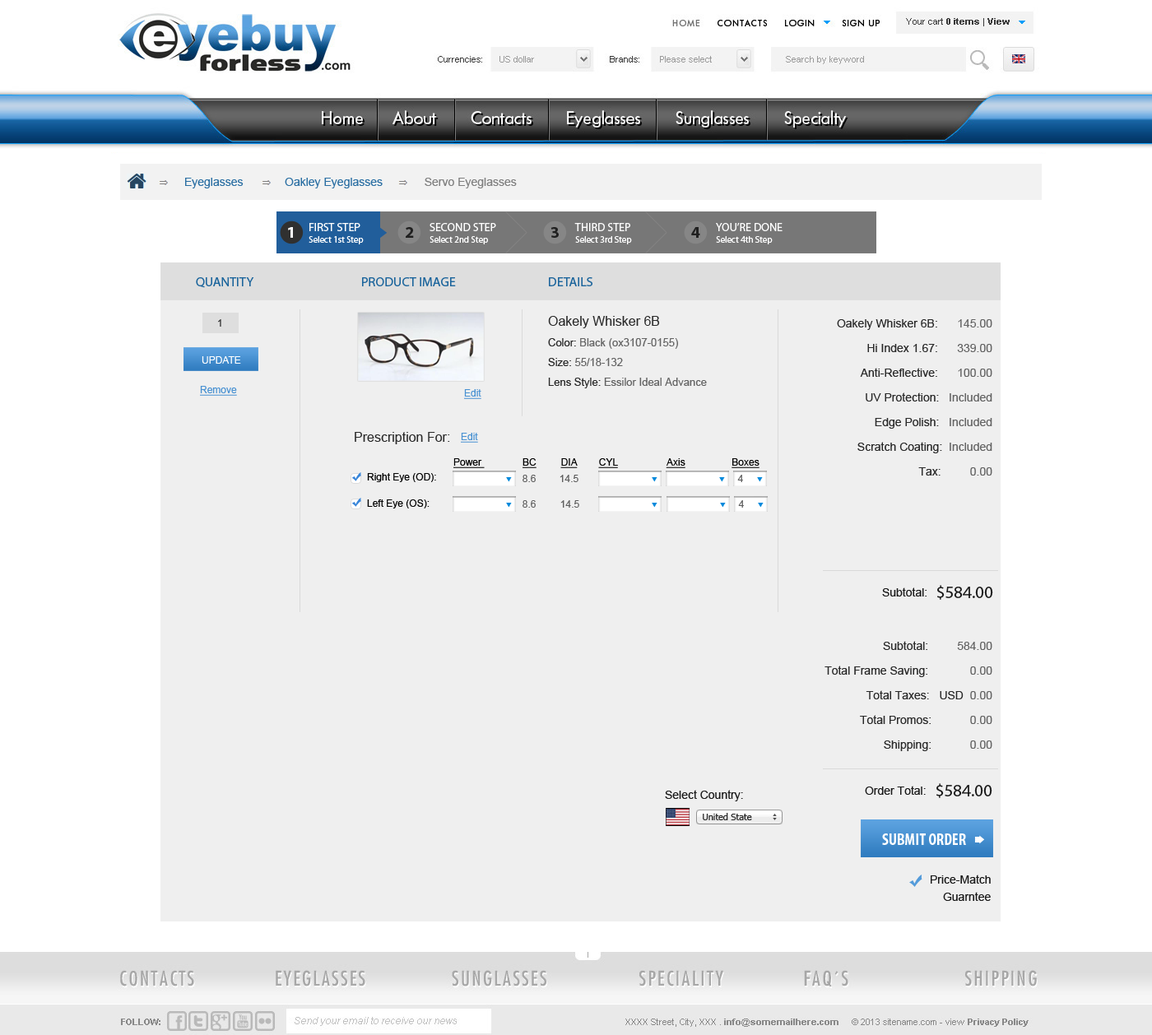
<style>
.page{position:relative;width:1152px;height:1035px;background:#efefef}
.page>*{position:absolute;margin:0}
.t1{font:11.5px "ArialMT";color:#2b6fa3}
.t2{font:11.5px "ArialMT";color:#7f7f7f}
.t3{font:16.5px "MyriadPro-Bold";color:#ffffff;text-transform:uppercase}
.t4{font:11.5px "MyriadPro-Regular";color:#ffffff;text-transform:uppercase}
.t5{font:16.5px "MyriadPro-Bold";color:#202020;text-transform:uppercase}
.t6{font:9.1px "MyriadPro-Regular";color:#ffffff}
.t7{font:13.2px "MyriadPro-Regular";color:#1c659c;text-transform:uppercase}
.t8{font:13.2px "ArialMT";color:#292929}
.t9{font:9.9px "ArialMT";color:#343434}
.t10{font:11.5px/24.7px "ArialMT";color:#292929}
.t11{font:11.5px/24.7px "ArialMT";color:#636363}
.t12{font:10.7px/19.7px "ArialMT";color:#636363}
.t13{font:10.7px/19.7px "ArialMT";color:#292929}
.t14{font:9.9px "ArialMT";color:#ffffff;text-transform:uppercase}
.t15{font:9.9px "ArialMT";color:#4891d2;text-decoration:underline}
.t16{font:9.9px "ArialMT";color:#000000;text-decoration:underline}
.t17{font:9.9px "ArialMT";color:#000000}
.t18{font:9.9px "ArialMT";color:#5d5d5d}
.t19{font:11.5px "ArialMT";color:#181818}
.t20{font:17.3px "MyriadPro-Regular";color:#181818}
.t21{font:9.1px "Tahoma";color:#252525}
.t22{font:16.5px "MyriadPro-BoldCond";color:#ffffff;text-transform:uppercase}
</style>
<div class="page">
<p class="t1" style="left:185px;top:178px;width:332px;height:10px">Eyeglasses             Oakley Eyeglasses             <span class="t2">Servo Eyeglasses</span></p>
<p class="t3" style="left:288px;top:227px;width:5px;height:11px">1</p>
<p class="t4" style="left:309px;top:223px;width:51px;height:8px">First Step</p>
<p class="t5" style="left:406px;top:227px;width:8px;height:11px">2</p>
<p class="t4" style="left:430px;top:223px;width:66px;height:8px">second Step</p>
<p class="t5" style="left:550px;top:227px;width:9px;height:11px">3</p>
<p class="t4" style="left:574px;top:223px;width:56px;height:8px">Third Step</p>
<p class="t5" style="left:691px;top:227px;width:9px;height:11px">4</p>
<p class="t4" style="left:716px;top:222px;width:67px;height:9px">you’re Done</p>
<p class="t6" style="left:309px;top:236px;width:55px;height:8px">Select 1st Step</p>
<p class="t6" style="left:430px;top:236px;width:58px;height:8px">Select 2nd Step</p>
<p class="t6" style="left:575px;top:236px;width:57px;height:8px">Select 3rd Step</p>
<p class="t6" style="left:716px;top:236px;width:57px;height:8px">Select 4th Step</p>
<p class="t7" style="left:196px;top:277px;width:58px;height:11px">Quantity</p>
<p class="t7" style="left:362px;top:277px;width:94px;height:9px">Product image</p>
<p class="t7" style="left:549px;top:277px;width:43px;height:9px">Details</p>
<p class="t8" style="left:548px;top:316px;width:112px;height:12px">Oakely Whisker 6B</p>
<p class="t9" style="left:218px;top:319px;width:3px;height:8px">1</p>
<p class="t10" style="left:837px;top:319px;width:155px;height:157px;text-align:right">Oakely Whisker 6B:      <span class="t11">145.00<br></span>Hi Index 1.67:      <span class="t11">339.00<br></span>Anti-Reflective:      <span class="t11">100.00<br></span>UV Protection:   <span class="t11">Included<br></span>Edge Polish:   <span class="t11">Included<br></span>Scratch Coating:  <span class="t11">Included<br></span>Tax:         <span class="t11">0.00</span></p>
<p class="t12" style="left:548px;top:338px;width:159px;height:50px"><span class="t13">Color: </span>Black (ox3107-0155)<br><span class="t13">Size: </span>55/18-132<br><span class="t13">Lens Style:</span> Essilor Ideal Advance</p>
<p class="t14" style="left:202px;top:356px;width:39px;height:8px">Update</p>
<p class="t15" style="left:200px;top:386px;width:37px;height:10px">Remove</p>
<p class="t15" style="left:464px;top:389px;width:17px;height:10px">Edit</p>
<p class="t8" style="left:355px;top:432px;width:95px;height:12px">Prescription For:</p>
<p class="t15" style="left:461px;top:433px;width:17px;height:10px">Edit</p>
<p class="t16" style="left:453px;top:458px;width:306px;height:10px">Power               BC         DIA        CYL                  Axis                 Boxes</p>
<p class="t17" style="left:367px;top:473px;width:69px;height:9px">Right Eye (OD):</p>
<p class="t18" style="left:523px;top:475px;width:13px;height:7px">8.6</p>
<p class="t18" style="left:560px;top:475px;width:18px;height:7px">14.5</p>
<p class="t18" style="left:737px;top:475px;width:6px;height:7px">4</p>
<p class="t17" style="left:367px;top:499px;width:63px;height:10px">Left Eye (OS):</p>
<p class="t18" style="left:523px;top:500px;width:13px;height:8px">8.6</p>
<p class="t18" style="left:560px;top:500px;width:19px;height:8px">14.5</p>
<p class="t18" style="left:738px;top:500px;width:6px;height:8px">4</p>
<p class="t19" style="left:882px;top:588px;width:45px;height:9px">Subtotal:</p>
<p class="t20" style="left:937px;top:585px;width:56px;height:15px">$584.00</p>
<p class="t10" style="left:824px;top:641px;width:168px;height:110px;text-align:right">Subtotal:        <span class="t11"> 584.00<br></span>Total Frame Saving:             <span class="t11">0.00<br></span>Total Taxes:   USD  <span class="t11">0.00<br></span>Total Promos:            <span class="t11">0.00<br></span>Shipping:            <span class="t11">0.00</span></p>
<p class="t19" style="left:865px;top:786px;width:61px;height:9px">Order Total:</p>
<p class="t20" style="left:936px;top:783px;width:56px;height:15px">$584.00</p>
<p class="t19" style="left:665px;top:790px;width:78px;height:11px">Select Country:</p>
<p class="t21" style="left:703px;top:813px;width:49px;height:7px">United State</p>
<p class="t22" style="left:882px;top:834px;width:84px;height:11px">Submit Order</p>
<p class="t19" style="left:931px;top:875px;width:60px;height:9px">Price-Match</p>
<p class="t19" style="left:943px;top:892px;width:48px;height:9px">Guarntee</p>
</div>
